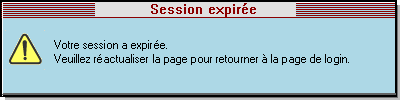
<style>
.page{position:relative;width:400px;height:100px;background:#add8e6}
.page>*{position:absolute;margin:0}
.t1{font:14px "System";letter-spacing:0.01em;color:#8b0000}
.t2{font:10px/14px "MS Sans Serif";letter-spacing:0.01em;color:#000000}
</style>
<div class="page">
<p class="t1" style="left:151px;top:3px;width:105px;height:14px">Session expirée</p>
<p class="t2" style="left:54px;top:40px;width:295px;height:25px">Votre session a expirée.<br>Veuillez réactualiser la page pour retourner à la page de login.</p>
</div>
